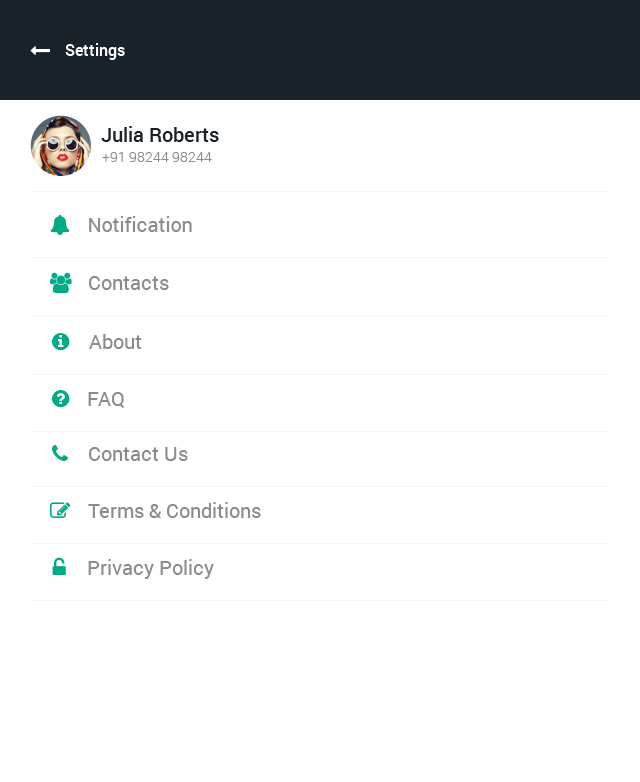
<style>
.page{position:relative;width:640px;height:782px;background:#ffffff}
.page>*{position:absolute;margin:0}
.t1{font:16px "Roboto-Medium";color:#ffffff}
.t2{font:20px "Roboto-Medium";color:#192229}
.t3{font:14px "Roboto-Light";color:#8b8b8b}
.t4{font:20px "Roboto-Regular";color:#8b8b8b}
</style>
<div class="page">
<p class="t1" style="left:65px;top:43px;width:60px;height:17px">Settings</p>
<p class="t2" style="left:101px;top:126px;width:118px;height:16px">Julia Roberts</p>
<p class="t3" style="left:102px;top:152px;width:110px;height:10px">+91 98244 98244</p>
<p class="t4" style="left:89px;top:216px;width:103px;height:16px">Notification</p>
<p class="t4" style="left:89px;top:276px;width:80px;height:14px">Contacts</p>
<p class="t4" style="left:89px;top:334px;width:53px;height:15px">About</p>
<p class="t4" style="left:88px;top:392px;width:37px;height:16px">FAQ</p>
<p class="t4" style="left:89px;top:447px;width:99px;height:14px">Contact Us</p>
<p class="t4" style="left:88px;top:502px;width:173px;height:16px">Terms &amp; Conditions</p>
<p class="t4" style="left:88px;top:559px;width:126px;height:20px">Privacy Policy</p>
</div>
